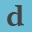
<style>
.page{position:relative;width:32px;height:32px;background:#6bbed5}
.page>*{position:absolute;margin:0}
.t1{font:30px "SitkaText-Bold";letter-spacing:-0.02em;color:#444444}
</style>
<div class="page">
<p class="t1" style="left:7px;top:5px;width:17px;height:21px">d</p>
</div>
